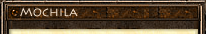
<style>
.page{position:relative;width:206px;height:34px}
.page>*{position:absolute;margin:0}
.t1{font:12px "LithosPro-Regular";color:#fcead6}
</style>
<div class="page">
<p class="t1" style="left:20px;top:7px;width:58px;height:10px">Mochila</p>
</div>
